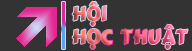
<style>
.page{position:relative;width:192px;height:51px;background:#333333}
.page>*{position:absolute;margin:0}
.t1{font:24px/23px "MTOCanun"}
</style>
<div class="page">
<p class="t1" style="left:72px;top:1px;width:116px;height:48px">Hội<br>Học Thuật</p>
</div>
